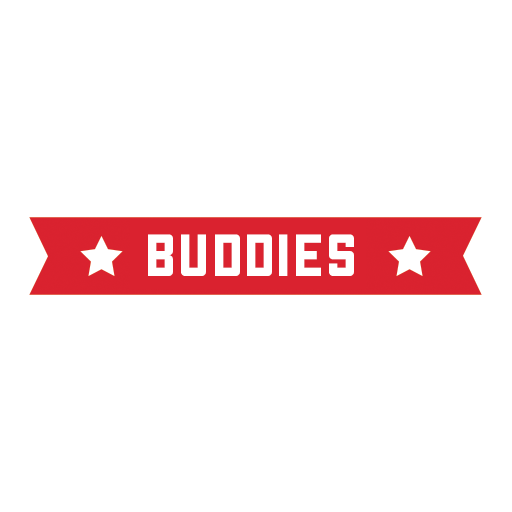
<style>
.page{position:relative;width:512px;height:512px;background:#ffffff}
.page>*{position:absolute;margin:0}
.t1{font:57.7px "Cornerstone";color:#ffffff}
</style>
<div class="page">
<p class="t1" style="left:148px;top:234px;width:206px;height:42px">buddies</p>
</div>
